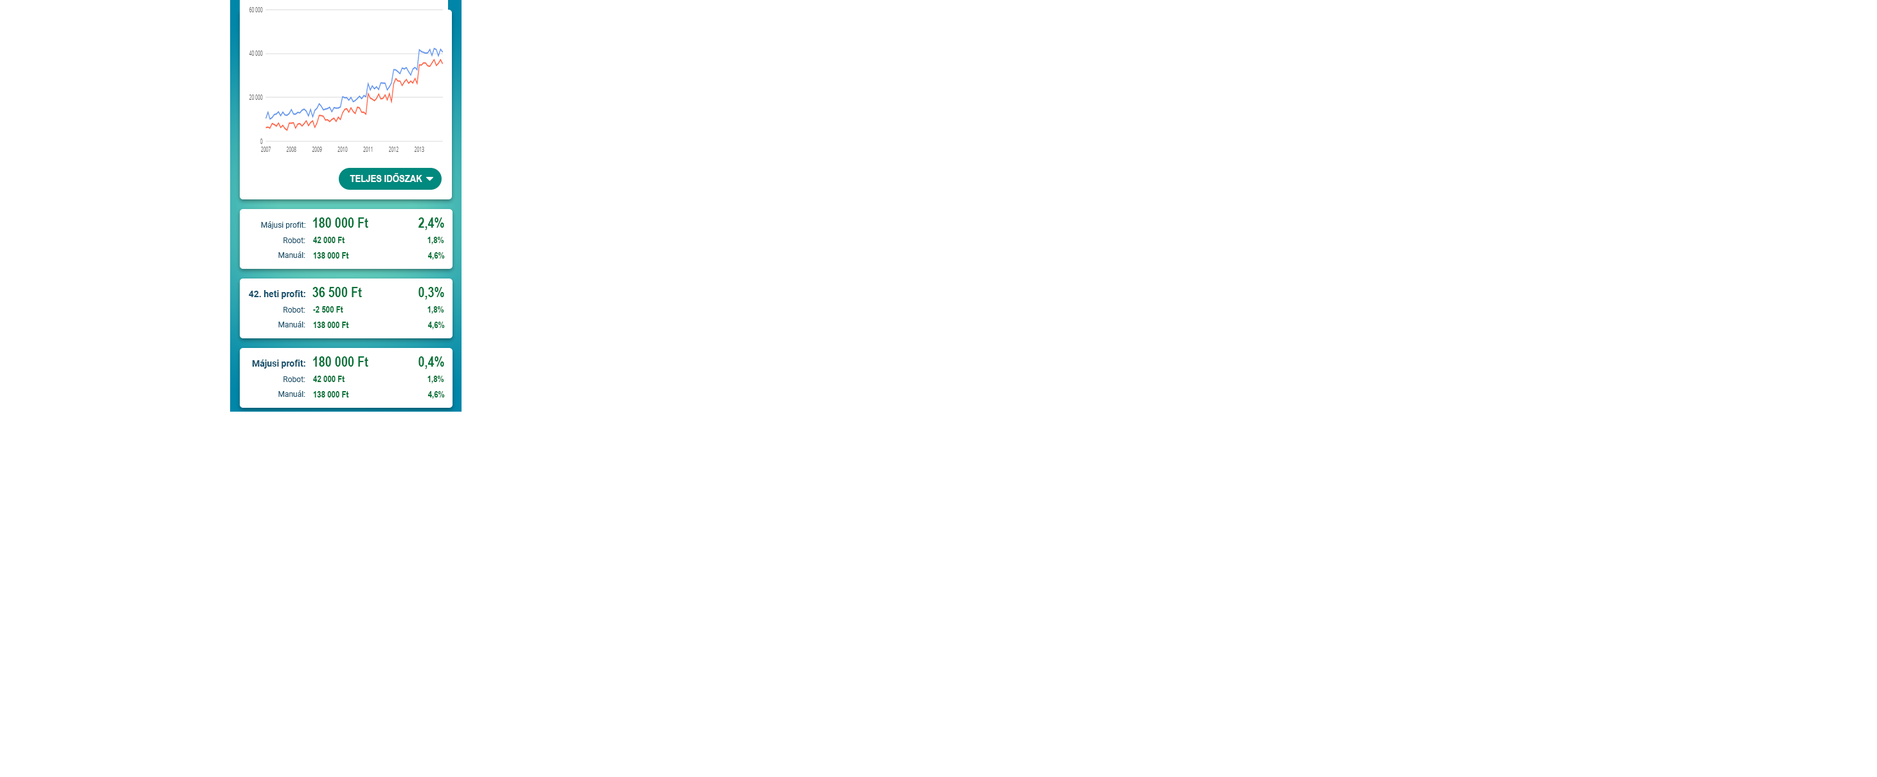
<style>
.page{position:relative;width:1877px;height:777px;background:#ffffff}
.page>*{position:absolute;margin:0}
.t1{font:10.3px "ArialNarrow-Bold";color:#ffffff;text-transform:uppercase}
.t2{font:7.7px "Roboto-Regular";color:#16516c}
.t3{font:14.1px "ArialNarrow-Bold";color:#007236}
.t4{font:9px "ArialNarrow-Bold";color:#007236}
.t5{font:9px "Roboto-Bold";color:#16516c}
</style>
<div class="page">
<p class="t1" style="left:350px;top:173px;width:72px;height:9px">Teljes időszak</p>
<p class="t2" style="left:261px;top:221px;width:45px;height:8px">Májusi profit:</p>
<p class="t3" style="left:313px;top:217px;width:55px;height:11px">180 000 Ft</p>
<p class="t3" style="left:419px;top:217px;width:25px;height:13px">2,4%</p>
<p class="t2" style="left:284px;top:237px;width:21px;height:6px">Robot:</p>
<p class="t4" style="left:313px;top:237px;width:32px;height:6px">42 000 Ft</p>
<p class="t4" style="left:428px;top:237px;width:16px;height:7px">1,8%</p>
<p class="t2" style="left:278px;top:251px;width:27px;height:7px">Manuál:</p>
<p class="t4" style="left:313px;top:252px;width:36px;height:6px">138 000 Ft</p>
<p class="t4" style="left:428px;top:252px;width:17px;height:8px">4,6%</p>
<p class="t5" style="left:249px;top:290px;width:56px;height:9px">42. heti profit:</p>
<p class="t3" style="left:312px;top:287px;width:50px;height:10px">36 500 Ft</p>
<p class="t3" style="left:419px;top:287px;width:25px;height:13px">0,3%</p>
<p class="t2" style="left:284px;top:307px;width:21px;height:5px">Robot:</p>
<p class="t4" style="left:313px;top:306px;width:30px;height:6px">-2 500 Ft</p>
<p class="t4" style="left:428px;top:306px;width:16px;height:8px">1,8%</p>
<p class="t2" style="left:278px;top:321px;width:27px;height:6px">Manuál:</p>
<p class="t4" style="left:313px;top:321px;width:36px;height:7px">138 000 Ft</p>
<p class="t4" style="left:428px;top:321px;width:17px;height:8px">4,6%</p>
<p class="t5" style="left:252px;top:359px;width:53px;height:9px">Májusi profit:</p>
<p class="t3" style="left:313px;top:356px;width:55px;height:10px">180 000 Ft</p>
<p class="t3" style="left:419px;top:356px;width:25px;height:13px">0,4%</p>
<p class="t2" style="left:284px;top:376px;width:21px;height:6px">Robot:</p>
<p class="t4" style="left:313px;top:375px;width:32px;height:7px">42 000 Ft</p>
<p class="t4" style="left:428px;top:375px;width:16px;height:8px">1,8%</p>
<p class="t2" style="left:278px;top:390px;width:27px;height:7px">Manuál:</p>
<p class="t4" style="left:313px;top:391px;width:36px;height:6px">138 000 Ft</p>
<p class="t4" style="left:428px;top:391px;width:17px;height:8px">4,6%</p>
</div>
